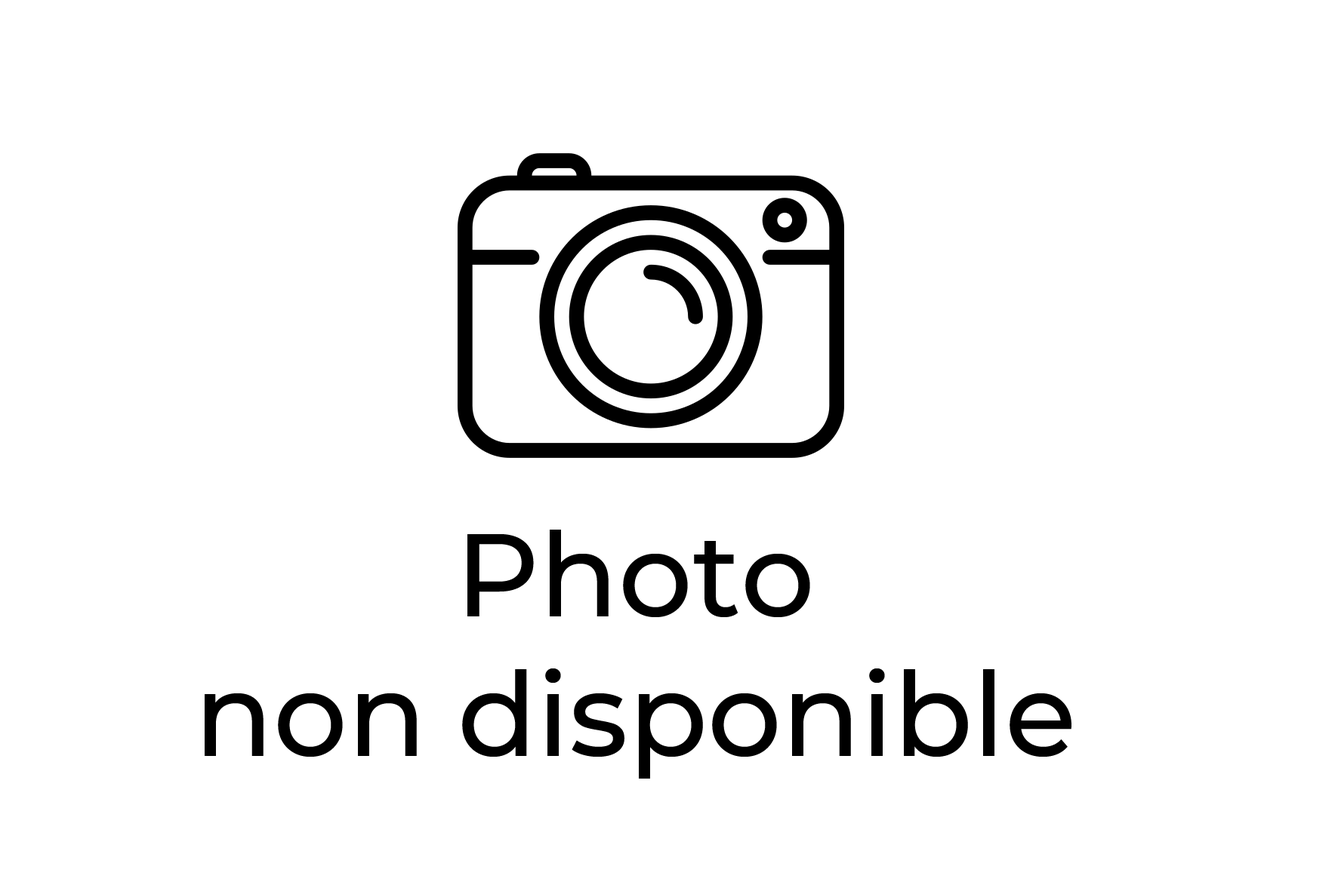
<style>
.page{position:relative;width:1338px;height:891px;background:#ffffff}
.page>*{position:absolute;margin:0}
.t1{font:116.4px "Montserrat-Medium";color:#000000}
</style>
<div class="page">
<p class="t1" style="left:205px;top:530px;width:866px;height:249px;text-align:center">Photo<br>non disponible</p>
</div>
